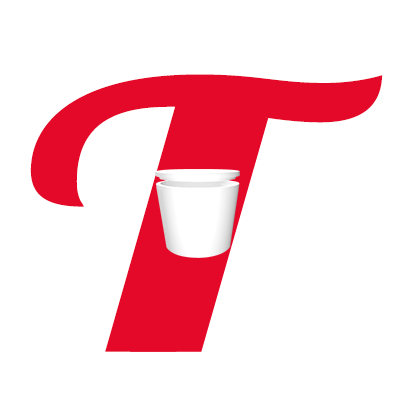
<style>
.page{position:relative;width:400px;height:400px;background:#ffffff}
.page>*{position:absolute;margin:0}
.t1{font:369.8px "Lobster1.4";color:#e40928;scale:1.33 1}
</style>
<div class="page">
<p class="t1" style="left:30px;top:74px;width:353px;height:278px">T</p>
</div>
